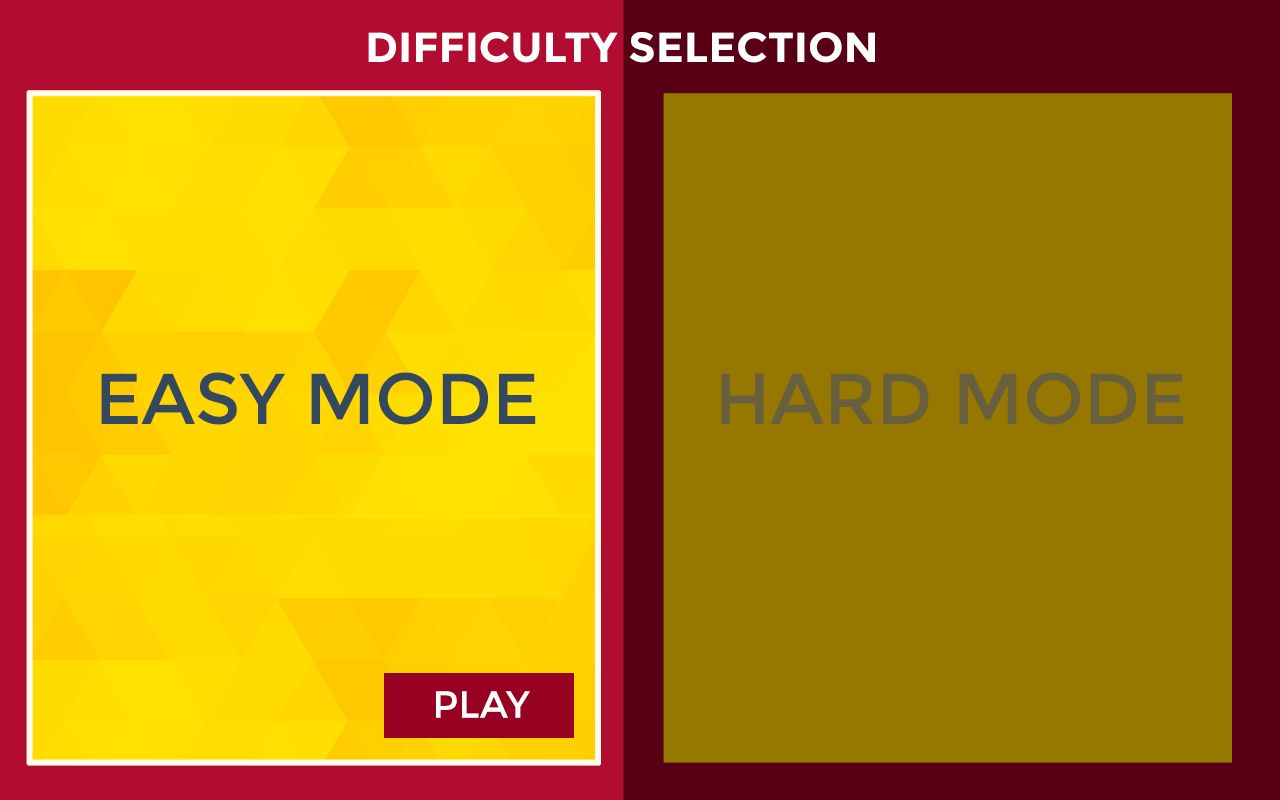
<style>
.page{position:relative;width:1280px;height:800px;background:#967700}
.page>*{position:absolute;margin:0}
.t1{font:42px "Montserrat-Bold";color:#ffffff}
.t2{font:72px "Montserrat-Regular";color:#34495e}
.t3{font:72px "Montserrat-Regular";color:#68603d}
.t4{font:38px "Montserrat-Regular";color:#ffffff}
</style>
<div class="page">
<p class="t1" style="left:368px;top:32px;width:507px;height:31px">DIFFICULTY SELECTION</p>
<p class="t2" style="left:101px;top:372px;width:435px;height:53px">EASY MODE</p>
<p class="t3" style="left:721px;top:372px;width:463px;height:53px">HARD MODE</p>
<p class="t4" style="left:436px;top:691px;width:94px;height:27px">PLAY</p>
</div>
